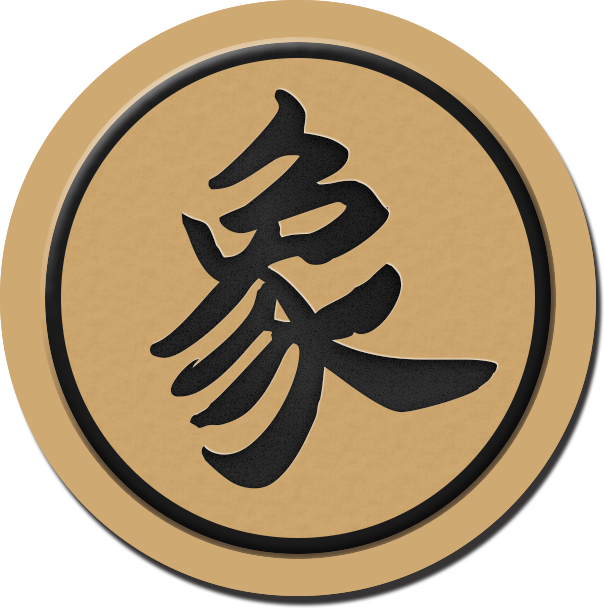
<style>
.page{position:relative;width:604px;height:608px;background:#ffffff}
.page>*{position:absolute;margin:0}
.t1{font:416.7px "AaYuwenlaoshidezi";letter-spacing:0.04em;color:#1b1b1b}
</style>
<div class="page">
<p class="t1" style="left:150px;top:89px;width:347px;height:400px">象</p>
<p class="t1" style="left:150px;top:89px;width:347px;height:400px">象</p>
<p class="t1" style="left:150px;top:89px;width:347px;height:400px">象</p>
<p class="t1" style="left:150px;top:89px;width:347px;height:400px">象</p>
<p class="t1" style="left:150px;top:89px;width:347px;height:400px">象</p>
</div>
